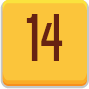
<style>
.page{position:relative;width:89px;height:89px;background:#fbc53b}
.page>*{position:absolute;margin:0}
.t1{font:60px "LibelSuitRg-Regular";color:#662312}
</style>
<div class="page">
<p class="t1" style="left:26px;top:14px;width:37px;height:47px">14</p>
</div>
